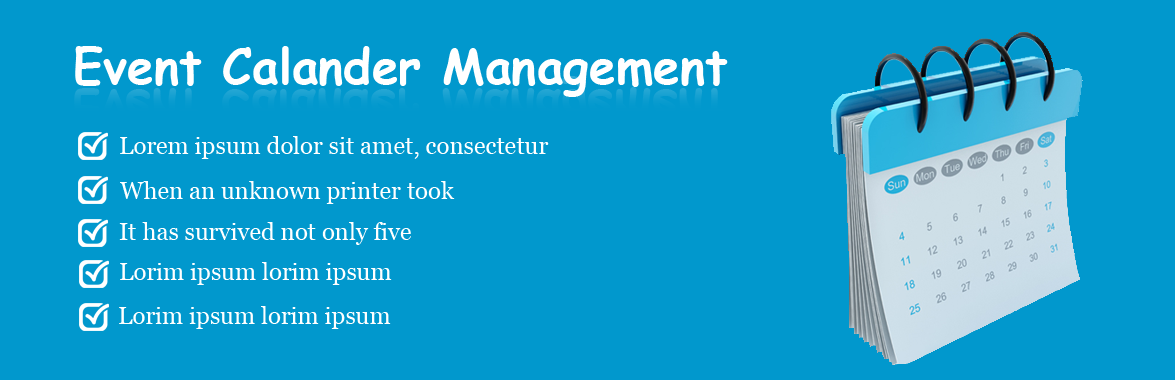
<style>
.page{position:relative;width:1175px;height:380px;background:#0198cd}
.page>*{position:absolute;margin:0}
.t1{font:48px "ComicSansMS-Bold";color:#ffffff}
.t2{font:24px "Georgia";color:#ffffff}
</style>
<div class="page">
<p class="t1" style="left:75px;top:46px;width:653px;height:51px">Event Calander Management</p>
<p class="t2" style="left:120px;top:136px;width:429px;height:23px">Lorem ipsum dolor sit amet, consectetur</p>
<p class="t2" style="left:120px;top:181px;width:335px;height:23px">When an unknown printer took</p>
<p class="t2" style="left:119px;top:222px;width:292px;height:23px">It has survived not only five</p>
<p class="t2" style="left:120px;top:262px;width:272px;height:23px">Lorim ipsum lorim ipsum</p>
<p class="t2" style="left:119px;top:306px;width:272px;height:23px">Lorim ipsum lorim ipsum</p>
</div>
